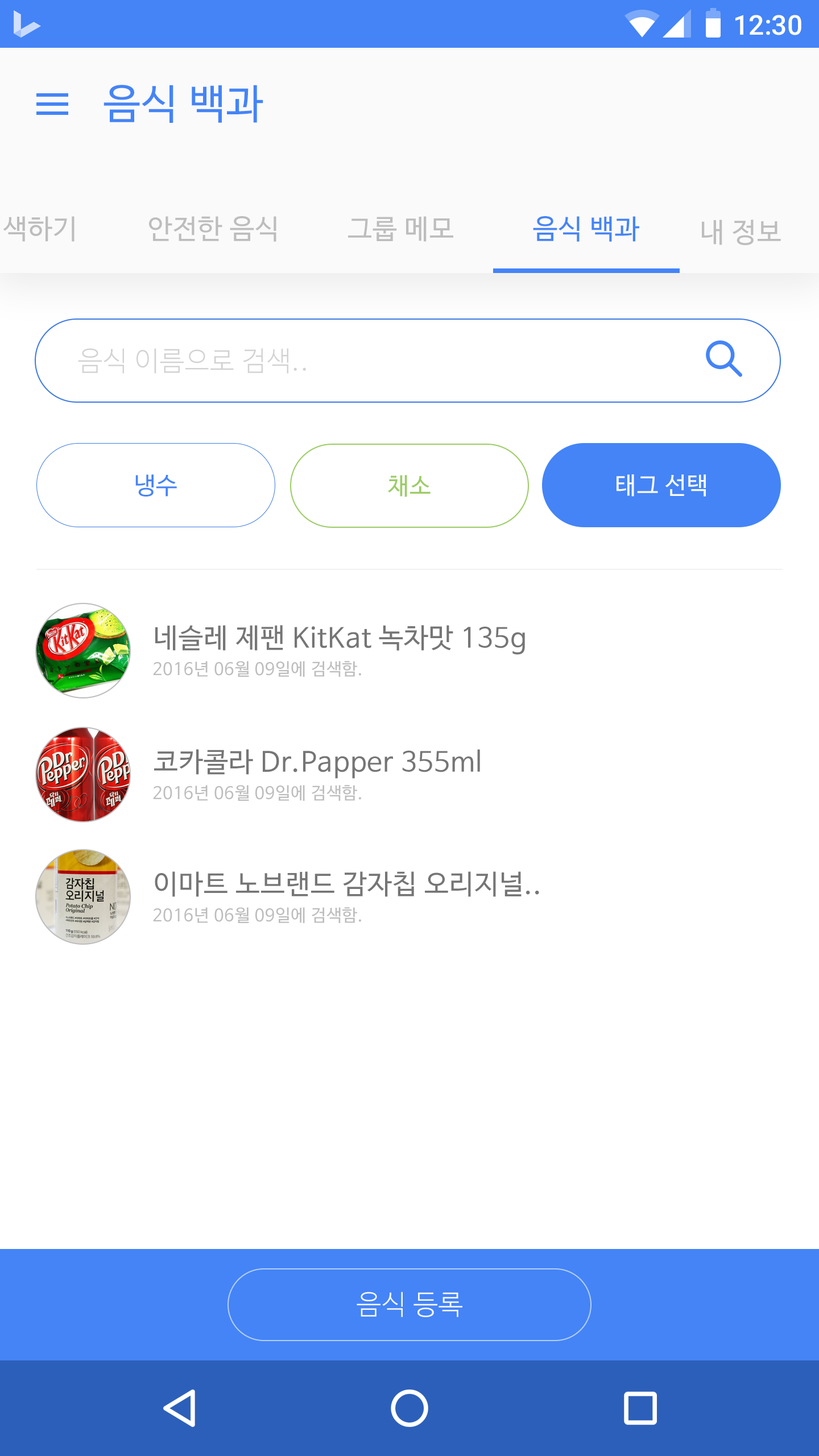
<style>
.page{position:relative;width:819px;height:1456px;background:#ffffff}
.page>*{position:absolute;margin:0}
.t1{font:27.3px "Roboto-Medium";color:#ffffff}
.t2{font:40.9px "NanumBarunGothic";letter-spacing:0.025em;color:#4484f6}
.t3{font:27.3px "NanumBarunGothic";letter-spacing:0.025em;color:#bdbdbd}
.t4{font:27.3px "NanumBarunGothic";letter-spacing:0.025em;color:#4484f6}
.t5{font:27.3px "NanumBarunGothicLight";letter-spacing:0.025em;color:#bdbdbd}
.t6{font:23.9px "NanumBarunGothic";letter-spacing:0.025em;color:#4484f6}
.t7{font:23.9px "NanumBarunGothic";letter-spacing:0.025em;color:#9ccc65}
.t8{font:23.9px "NanumBarunGothic";letter-spacing:0.025em;color:#fafafa}
.t9{font:27.3px "NanumBarunGothic";letter-spacing:0.025em;color:#757575}
.t10{font:17.1px "NanumBarunGothic";letter-spacing:0.025em;color:#bdbdbd}
.t11{font:27.3px "NanumBarunGothicLight";letter-spacing:0.025em;color:#fafafa}
</style>
<div class="page">
<p class="t1" style="left:735px;top:15px;width:66px;height:20px">12:30</p>
<p class="t2" style="left:104px;top:85px;width:159px;height:38px">음식 백과</p>
<p class="t3" style="left:149px;top:216px;width:127px;height:26px">안전한 음식</p>
<p class="t3" style="left:348px;top:216px;width:105px;height:26px">그룹 메모</p>
<p class="t4" style="left:533px;top:216px;width:106px;height:26px">음식 백과</p>
<p class="t3" style="left:702px;top:220px;width:79px;height:25px">내 정보</p>
<p class="t5" style="left:78px;top:348px;width:228px;height:26px;opacity:0.7">음식 이름으로 검색..</p>
<p class="t6" style="left:135px;top:474px;width:42px;height:23px">냉수</p>
<p class="t7" style="left:388px;top:475px;width:43px;height:22px">채소</p>
<p class="t8" style="left:617px;top:474px;width:89px;height:23px">태그 선택</p>
<p class="t9" style="left:155px;top:625px;width:370px;height:30px">네슬레 제팬 KitKat 녹차맛 135g</p>
<p class="t10" style="left:153px;top:661px;width:208px;height:16px">2016년 06월 09일에 검색함.</p>
<p class="t9" style="left:154px;top:749px;width:326px;height:30px">코카콜라 Dr.Papper 355ml</p>
<p class="t10" style="left:153px;top:785px;width:208px;height:16px">2016년 06월 09일에 검색함.</p>
<p class="t9" style="left:155px;top:871px;width:384px;height:26px">이마트 노브랜드 감자칩 오리지널..</p>
<p class="t10" style="left:153px;top:907px;width:208px;height:16px">2016년 06월 09일에 검색함.</p>
<p class="t11" style="left:357px;top:1292px;width:105px;height:25px">음식 등록</p>
</div>
